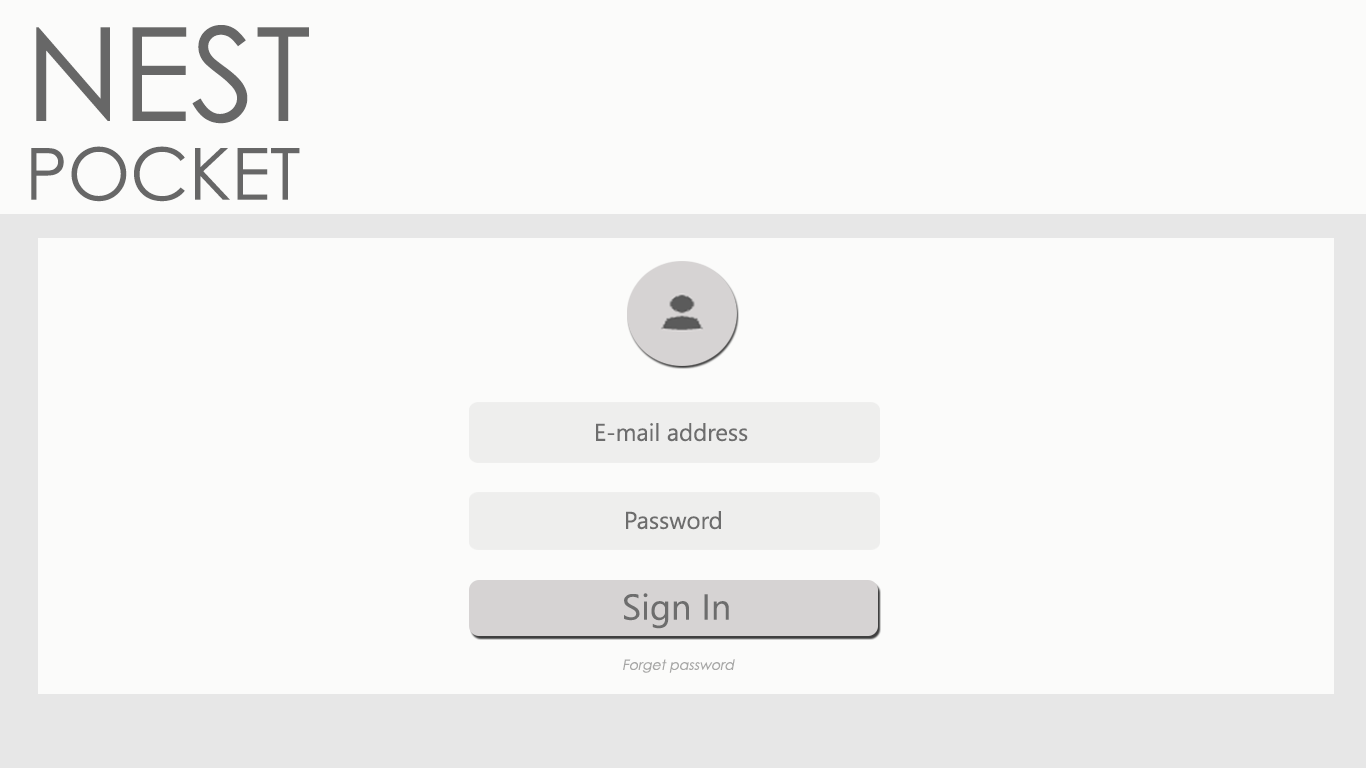
<style>
.page{position:relative;width:1366px;height:768px;background:#fbfbfa}
.page>*{position:absolute;margin:0}
.t1{font:130px "CenturyGothic";color:#676767}
.t2{font:90px "CenturyGothic";color:#676767}
.t3{font:72px "CenturyGothic";color:#676767}
.t4{font:24px "SegoeUI";color:#6d6d6d}
.t5{font:36px "SegoeUI";color:#6d6d6d}
.t6{font:14px "CenturyGothic";color:#a7a7a6;font-style:italic}
</style>
<div class="page">
<p class="t1" style="left:36px;top:25px;width:273px;height:99px"><span class="t2"><br></span>NEST</p>
<p class="t3" style="left:31px;top:146px;width:269px;height:56px">POCKET</p>
<p class="t4" style="left:596px;top:423px;width:152px;height:19px">E-mail address</p>
<p class="t4" style="left:626px;top:511px;width:95px;height:19px">Password</p>
<p class="t5" style="left:624px;top:593px;width:105px;height:36px">Sign In</p>
<p class="t6" style="left:623px;top:659px;width:112px;height:14px">Forget password</p>
</div>
